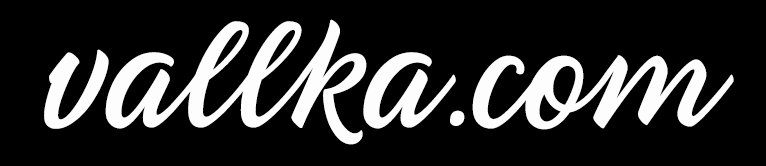
<style>
.page{position:relative;width:766px;height:166px;background:#000000}
.page>*{position:absolute;margin:0}
.t1{font:125px "BrushAb-Script";color:#fdfdfd}
</style>
<div class="page">
<p class="t1" style="left:44px;top:19px;width:690px;height:126px">vallka.com</p>
</div>
